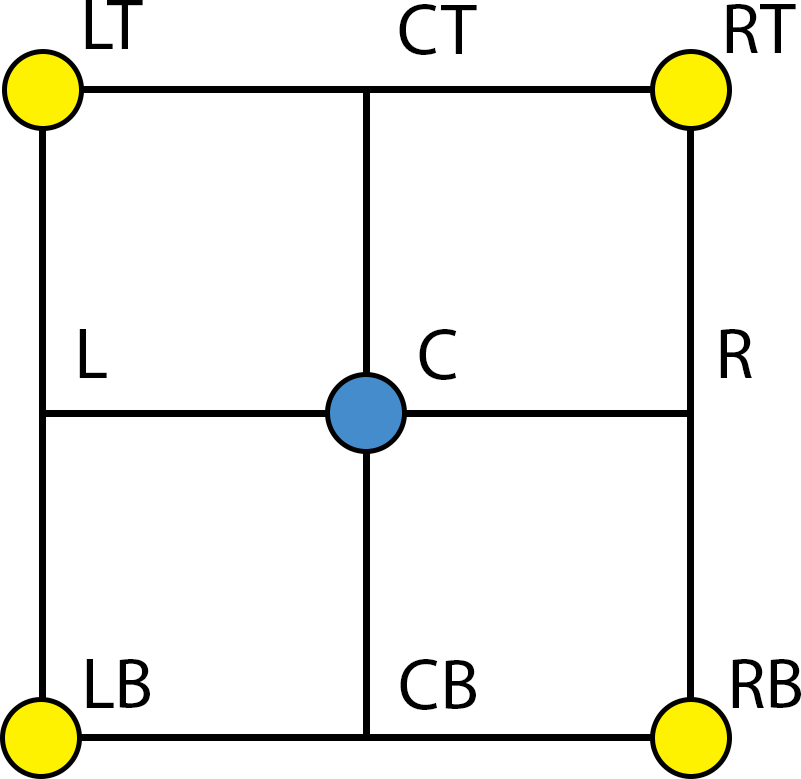
<style>
.page{position:relative;width:801px;height:779px;background:#ffffff}
.page>*{position:absolute;margin:0}
.t1{font:72px "MyriadPro-Regular";color:#000000}
</style>
<div class="page">
<p class="t1" style="left:85px;top:0px;width:58px;height:49px">LT</p>
<p class="t1" style="left:399px;top:4px;width:78px;height:51px">CT</p>
<p class="t1" style="left:726px;top:4px;width:70px;height:49px">RT</p>
<p class="t1" style="left:79px;top:329px;width:28px;height:49px">L</p>
<p class="t1" style="left:419px;top:329px;width:38px;height:51px">C</p>
<p class="t1" style="left:720px;top:329px;width:32px;height:49px">R</p>
<p class="t1" style="left:86px;top:659px;width:64px;height:49px">LB</p>
<p class="t1" style="left:400px;top:659px;width:76px;height:51px">CB</p>
<p class="t1" style="left:732px;top:659px;width:69px;height:49px">RB</p>
</div>
